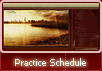
<style>
.page{position:relative;width:102px;height:71px}
.page>*{position:absolute;margin:0}
.t1{font:9px "Tahoma";color:#ffffff}
</style>
<div class="page">
<p class="t1" style="left:15px;top:58px;width:71px;height:8px">Practice Schedule</p>
</div>
